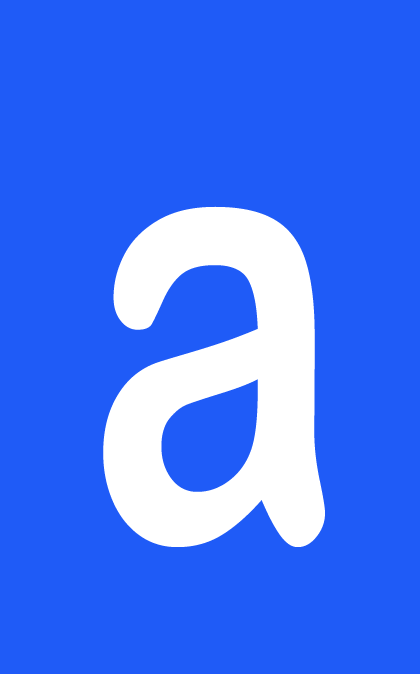
<style>
.page{position:relative;width:420px;height:674px;background:#1f5bf7}
.page>*{position:absolute;margin:0}
.t1{font:625.2px "ArialRoundedMTBold";color:#ffffff;scale:0.69 1}
</style>
<div class="page">
<p class="t1" style="left:103px;top:206px;width:222px;height:341px">a</p>
</div>
